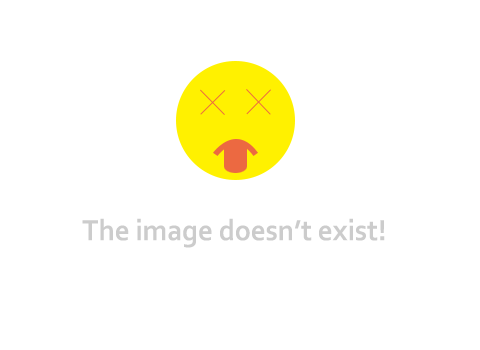
<style>
.page{position:relative;width:480px;height:350px;background:#ffffff}
.page>*{position:absolute;margin:0}
.t1{font:30.6px "Corbel-Bold";color:#cccccc;scale:0.95 1}
</style>
<div class="page">
<p class="t1" style="left:82px;top:218px;width:303px;height:30px">The image doesn’t exist!</p>
</div>
